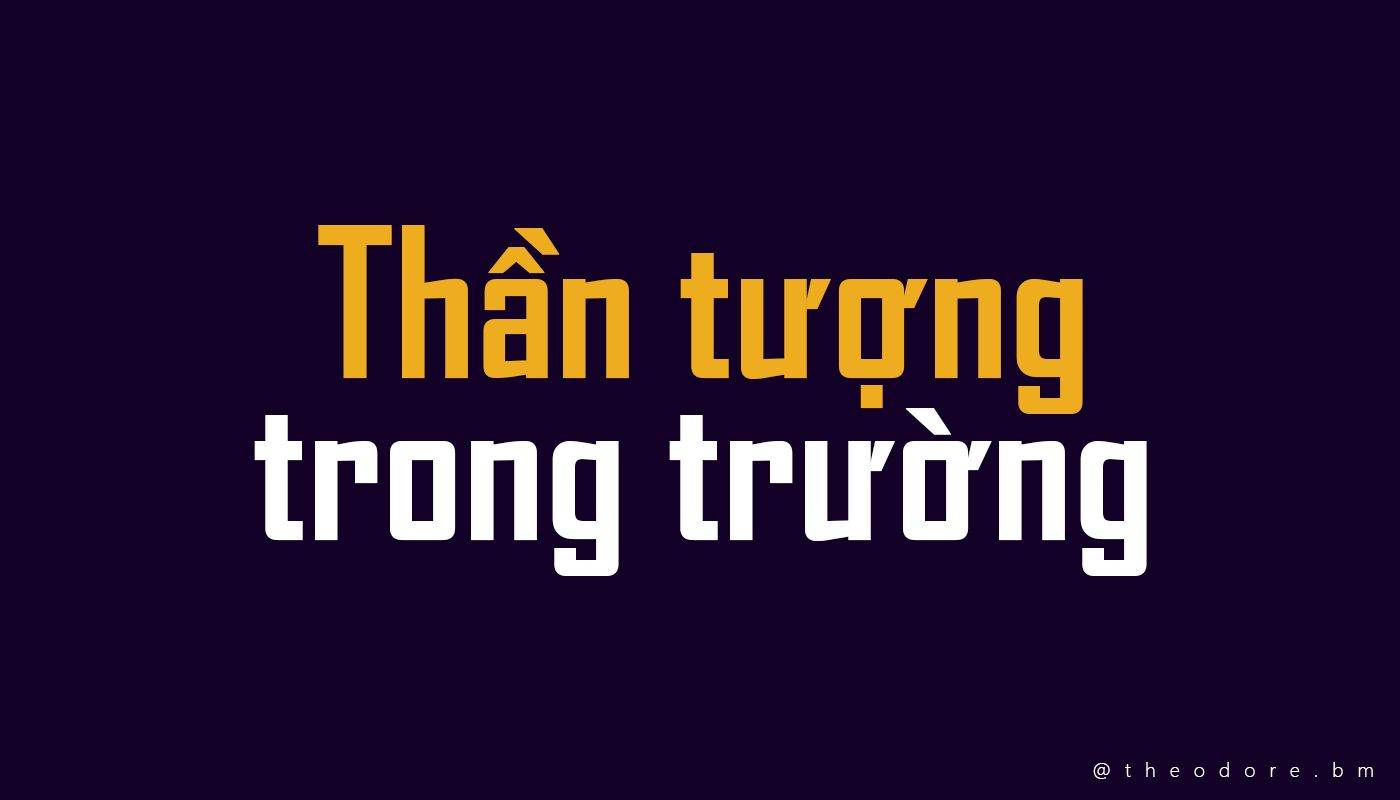
<style>
.page{position:relative;width:1400px;height:800px;background:#120026}
.page>*{position:absolute;margin:0}
.t1{font:200px/162px "SVN-AgencyFBbold";color:#ffffff}
.t2{font:200px/162px "SVN-AgencyFBbold";color:#eead1f}
.t3{font:20px "SegoeUI-Light";letter-spacing:0.7em;color:#ffffff}
</style>
<div class="page">
<p class="t1" style="left:254px;top:225px;width:893px;height:351px;text-align:center"><span class="t2">Thần tượng<br></span>trong trường</p>
<p class="t3" style="left:1093px;top:762px;width:280px;height:17px">@theodore.bm</p>
</div>
